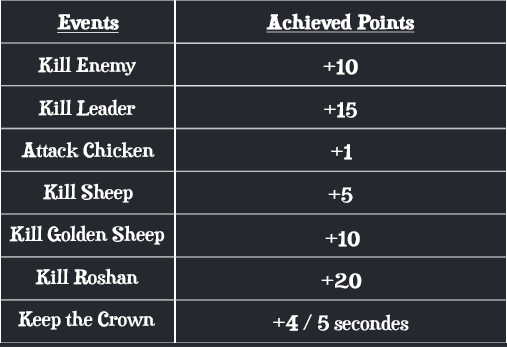
<style>
.page{position:relative;width:507px;height:347px;background:#25292f}
.page>*{position:absolute;margin:0}
.t1{font:18.6px "Duality-Regular";letter-spacing:-0.01em;color:#ffffff;font-weight:bold;text-decoration:underline;scale:1.29 1}
.t2{font:18.6px "Duality-Regular";letter-spacing:-0.01em;color:#ffffff;scale:1.29 1}
</style>
<div class="page">
<p class="t1" style="left:57px;top:14px;width:62px;height:19px">Events</p>
<p class="t1" style="left:266px;top:13px;width:149px;height:20px">Achieved Points</p>
<p class="t2" style="left:38px;top:56px;width:98px;height:20px">Kill Enemy</p>
<p class="t2" style="left:323px;top:59px;width:35px;height:16px">+10</p>
<p class="t2" style="left:38px;top:99px;width:98px;height:17px">Kill Leader</p>
<p class="t2" style="left:324px;top:102px;width:33px;height:16px">+15</p>
<p class="t2" style="left:21px;top:141px;width:134px;height:17px">Attack Chicken</p>
<p class="t2" style="left:331px;top:144px;width:21px;height:16px">+1</p>
<p class="t2" style="left:43px;top:183px;width:90px;height:20px">Kill Sheep</p>
<p class="t2" style="left:328px;top:187px;width:25px;height:16px">+5</p>
<p class="t2" style="left:9px;top:225px;width:156px;height:20px">Kill Golden Sheep</p>
<p class="t2" style="left:325px;top:231px;width:35px;height:16px">+10</p>
<p class="t2" style="left:35px;top:268px;width:104px;height:17px">Kill Roshan</p>
<p class="t2" style="left:321px;top:273px;width:41px;height:16px">+20</p>
<p class="t2" style="left:18px;top:310px;width:137px;height:20px">Keep the Crown</p>
<p class="t2" style="left:273px;top:314px;width:136px;height:17px">+4 / 5 secondes</p>
</div>
